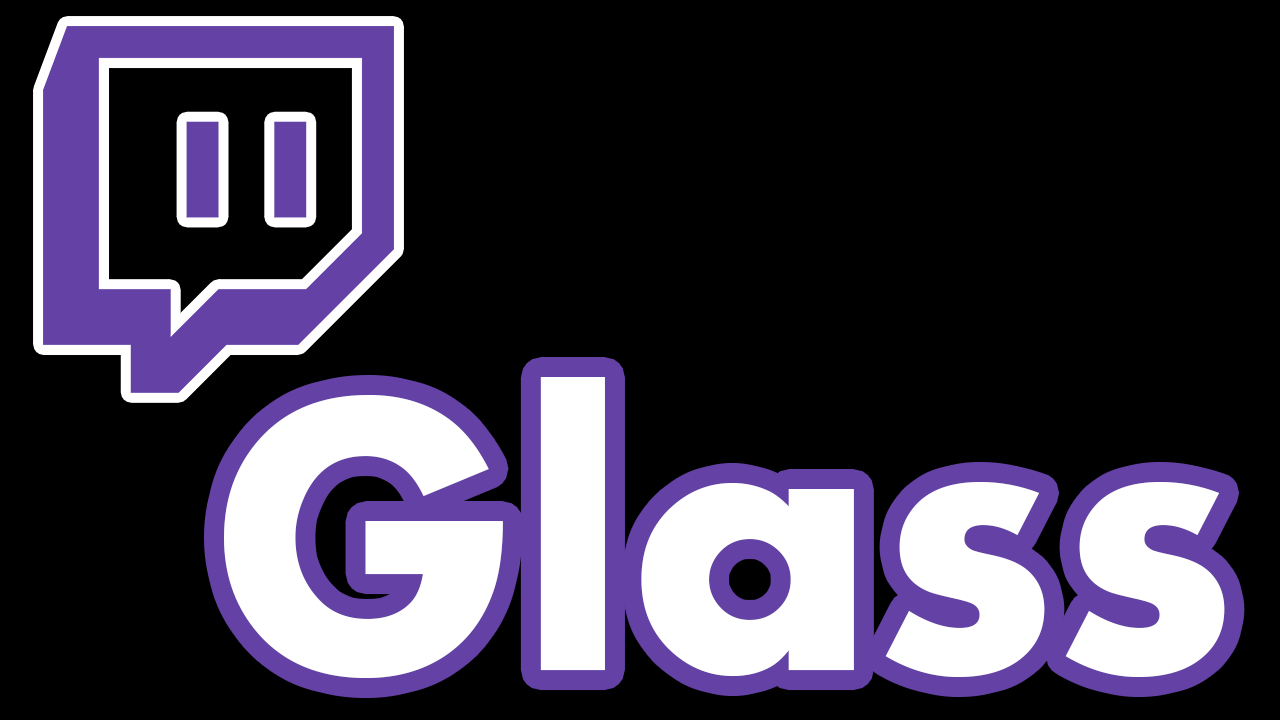
<style>
.page{position:relative;width:1280px;height:720px;background:#000000}
.page>*{position:absolute;margin:0}
.t1{font:400px "Aharoni-Bold";color:#ffffff}
</style>
<div class="page">
<p class="t1" style="left:224px;top:377px;width:1001px;height:301px">Glass</p>
</div>
